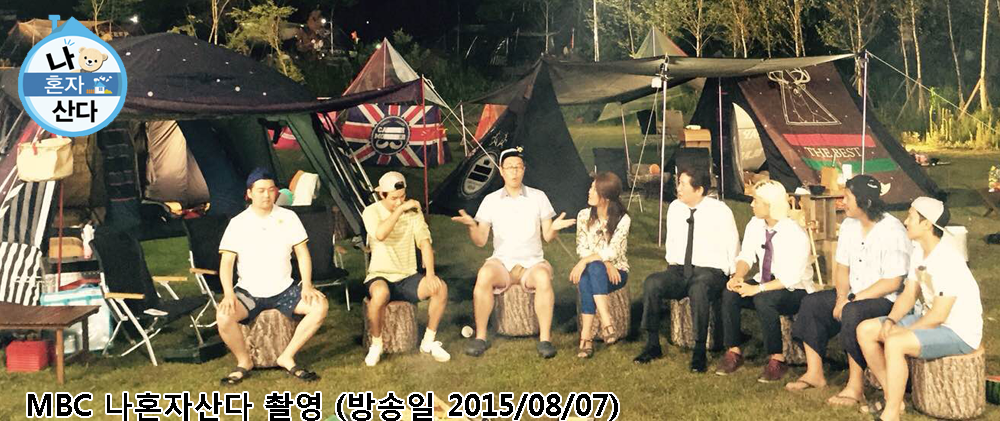
<style>
.page{position:relative;width:1000px;height:421px}
.page>*{position:absolute;margin:0}
.t1{font:30px "MalgunGothicBold";color:#000000}
</style>
<div class="page">
<p class="t1" style="left:28px;top:393px;width:590px;height:28px">MBC 나혼자산다 촬영 (방송일 2015/08/07)</p>
</div>
